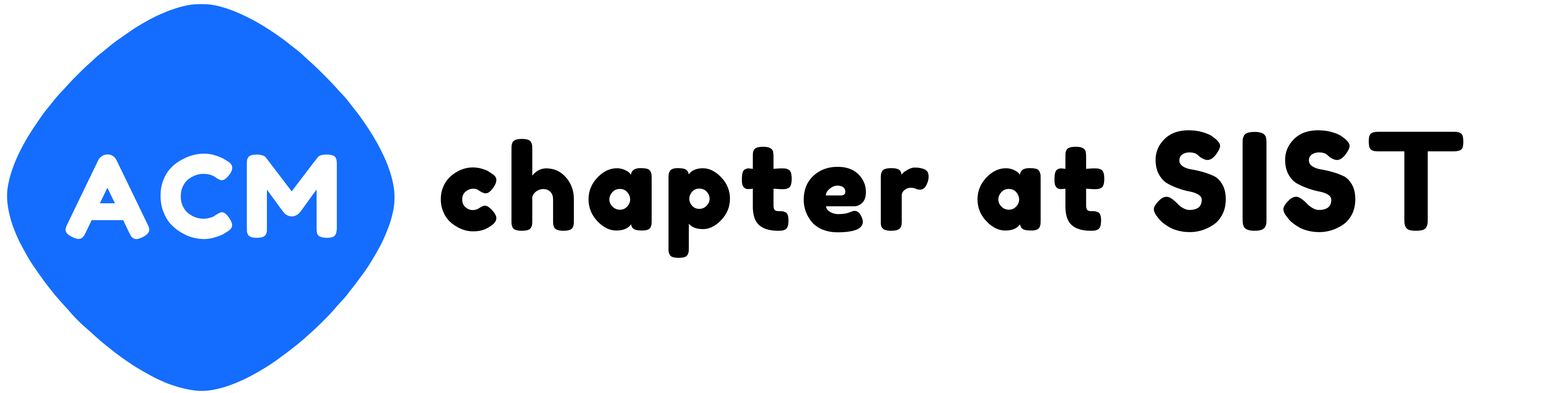
<style>
.page{position:relative;width:1568px;height:393px;background:#ffffff}
.page>*{position:absolute;margin:0}
.t1{font:119px "FredokaOne-Regular";letter-spacing:0.06em;color:#000000}
.t2{font:134.8px "FredokaOne-Regular";letter-spacing:0.06em;color:#000000}
.t3{font:114px "FredokaOne-Regular";letter-spacing:0.06em;color:#ffffff}
</style>
<div class="page">
<p class="t1" style="left:441px;top:130px;width:1022px;height:128px">chapter at <span class="t2">SIST</span></p>
<p class="t3" style="left:65px;top:153px;width:272px;height:86px">ACM</p>
</div>
